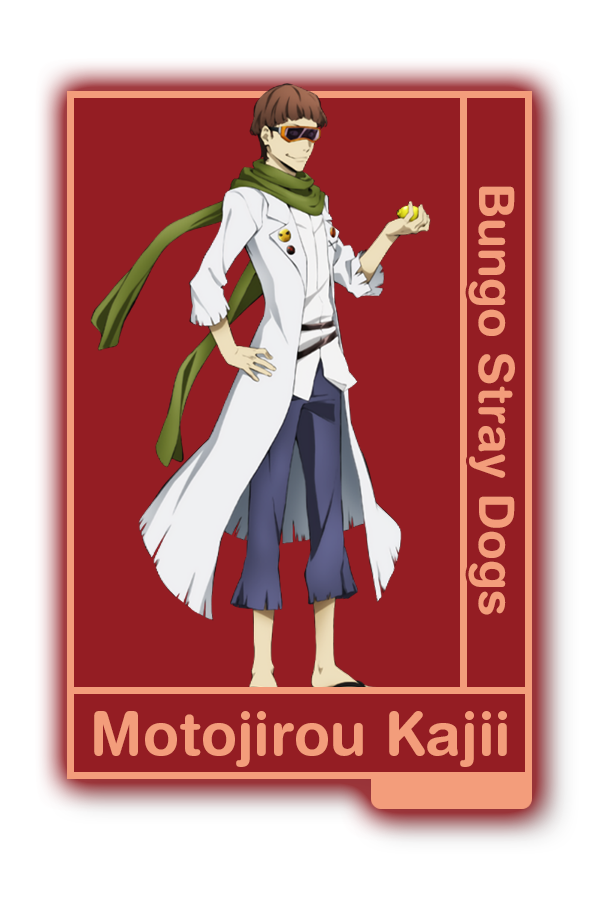
<style>
.page{position:relative;width:600px;height:900px;background:#941d23}
.page>*{position:absolute;margin:0}
.t1{font:48.8px "HelveticaRounded-Bold";color:#f39d7b}
.t2{font:59.2px "HelveticaRounded-Bold";color:#f39d7b}
</style>
<div class="page">
<p class="t1" style="left:468px;top:186px;width:47px;height:429px;rotate:90deg">Bungo Stray Dogs</p>
<p class="t2" style="left:94px;top:711px;width:413px;height:56px">Motojirou Kajii</p>
</div>
